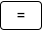
<style>
.page{position:relative;width:42px;height:30px;background:#ffffff}
.page>*{position:absolute;margin:0}
.t1{font:15px "SourceSansPro-Regular";color:#000000;text-transform:uppercase;font-weight:bold}
</style>
<div class="page">
<p class="t1" style="left:17px;top:12px;width:8px;height:6px">=</p>
</div>
